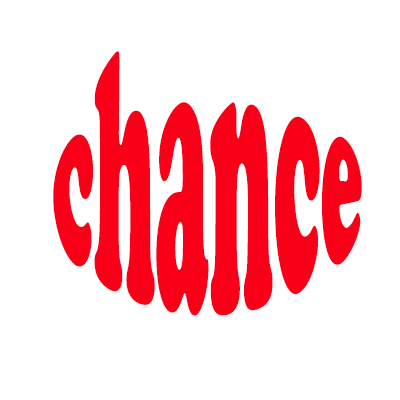
<style>
.page{position:relative;width:400px;height:400px;background:#ffffff}
.page>*{position:absolute;margin:0}
.t1{font:172.1px "CooperBlackStd";color:#fa0018;scale:0.49 1}
</style>
<div class="page">
<p class="t1" style="left:53px;top:51px;width:309px;height:265px">chance</p>
</div>
